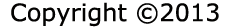
<style>
.page{position:relative;width:234px;height:28px;background:#ffffff}
.page>*{position:absolute;margin:0}
.t1{font:24px "Verdana";color:#030201}
</style>
<div class="page">
<p class="t1" style="left:11px;top:2px;width:208px;height:25px">Copyright ©2013</p>
</div>
